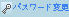
<style>
.page{position:relative;width:69px;height:17px;background:#b6d7e1}
.page>*{position:absolute;margin:0}
.t1{font:8px "FZLTZHK--GBK1-0";color:#3d80ef}
</style>
<div class="page">
<p class="t1" style="left:13px;top:3px;width:56px;height:8px">パスワード変更</p>
</div>
